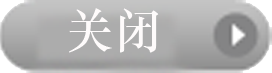
<style>
.page{position:relative;width:272px;height:73px}
.page>*{position:absolute;margin:0}
.t1{font:48px "STZhongsong";color:#fefbfb}
</style>
<div class="page">
<p class="t1" style="left:69px;top:8px;width:90px;height:45px">关闭</p>
</div>
